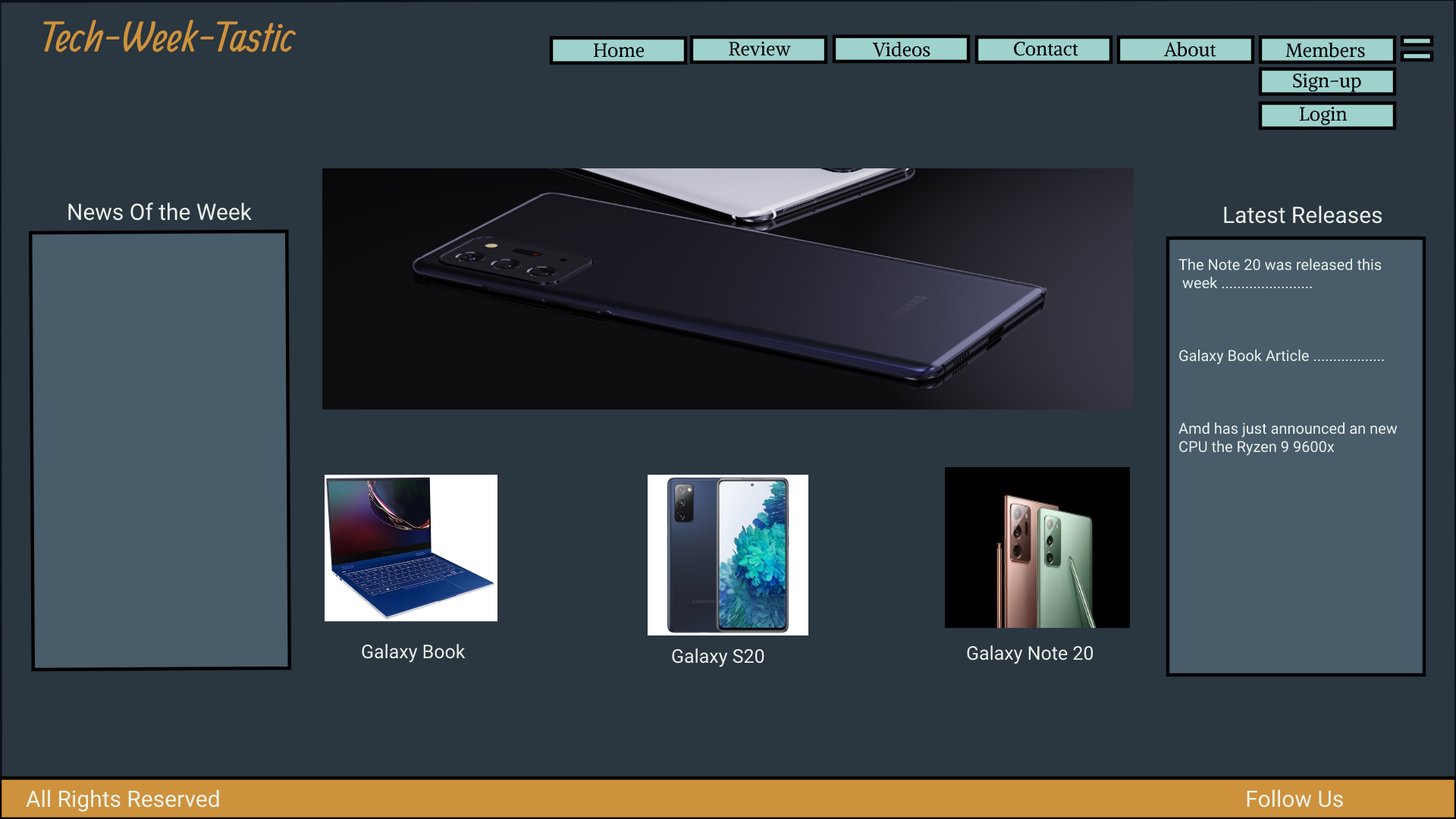
<style>
.page{position:relative;width:1456px;height:819px;background:#2a3640}
.page>*{position:absolute;margin:0}
.t1{font:41.7px "Allan-Regular";color:#ce923c;scale:1.11 1}
.t2{font:19px "AlikeAngular-Regular";color:#000000}
.t3{font:22.7px "Roboto-Regular";color:#ecf3ec}
.t4{font:15.2px "Roboto-Regular";color:#ecf3ec}
.t5{font:19px "Roboto-Regular";color:#ecf3ec}
</style>
<div class="page">
<p class="t1" style="left:43px;top:20px;width:254px;height:32px">Tech-Week-Tastic</p>
<p class="t2" style="left:729px;top:41px;width:62px;height:15px">Review</p>
<p class="t2" style="left:872px;top:42px;width:58px;height:15px">Videos</p>
<p class="t2" style="left:1014px;top:41px;width:64px;height:15px">Contact</p>
<p class="t2" style="left:1163px;top:42px;width:53px;height:15px">About</p>
<p class="t2" style="left:593px;top:43px;width:52px;height:15px">Home</p>
<p class="t2" style="left:1285px;top:42px;width:80px;height:16px">Members</p>
<p class="t2" style="left:1293px;top:73px;width:68px;height:20px">Sign-up</p>
<p class="t2" style="left:1299px;top:106px;width:49px;height:19px">Login</p>
<p class="t3" style="left:68px;top:202px;width:184px;height:19px">News Of the Week</p>
<p class="t3" style="left:1224px;top:206px;width:158px;height:18px">Latest Releases</p>
<p class="t4" style="left:1178px;top:259px;width:220px;height:197px">The Note 20 was released this<br> week .......................<br><br><br><br>Galaxy Book Article ..................<br><br><br><br>Amd has just announced an new <br>CPU the Ryzen 9 9600x</p>
<p class="t5" style="left:362px;top:644px;width:104px;height:19px">Galaxy Book</p>
<p class="t5" style="left:672px;top:648px;width:92px;height:19px">Galaxy S20</p>
<p class="t5" style="left:967px;top:645px;width:127px;height:19px">Galaxy Note 20</p>
<p class="t3" style="left:26px;top:789px;width:1317px;height:23px">All Rights Reserved                                                                                                                                                                                      Follow Us</p>
</div>
